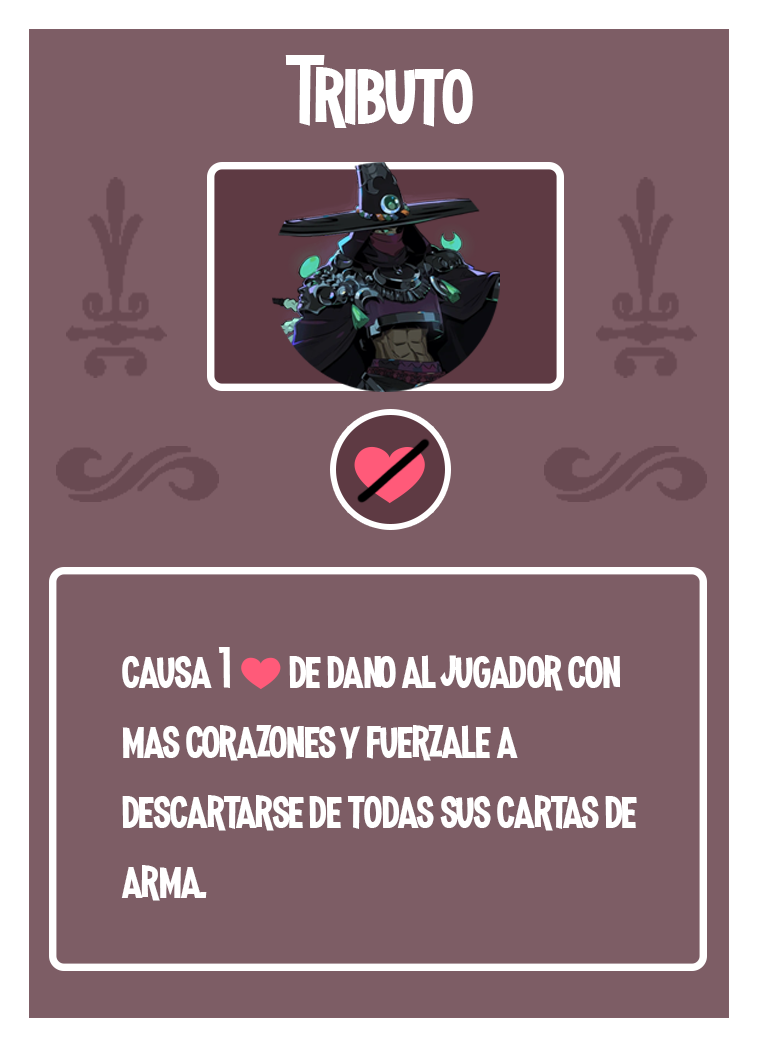
<style>
.page{position:relative;width:758px;height:1047px;background:#7d5d65}
.page>*{position:absolute;margin:0}
.t1{font:100px "MadnessHyperactive";color:#ffffff}
.t2{font:58.3px "MadnessHyperactive";color:#ffffff}
.t3{font:41.7px "EmojiOneColor";color:#ffffff}
</style>
<div class="page">
<p class="t1" style="left:285px;top:55px;width:188px;height:73px">Tributo</p>
<p class="t2" style="left:121px;top:647px;width:516px;height:254px">causa 1 <span class="t3">❤️ </span>de dano al jugador con mas corazones y fuerzale a descartarse de todas sus cartas de arma.</p>
</div>
